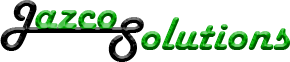
<style>
.page{position:relative;width:290px;height:62px;background:#ffffff}
.page>*{position:absolute;margin:0}
.t1{font:50px "HarlowSolid";color:#000000}
.t2{font:50px "HarlowSolid"}
</style>
<div class="page">
<p class="t1" style="left:0px;top:0px;width:37px;height:51px">J</p>
<p class="t2" style="left:35px;top:10px;width:82px;height:19px">azco</p>
<p class="t2" style="left:108px;top:17px;width:182px;height:45px">Solutions</p>
</div>
